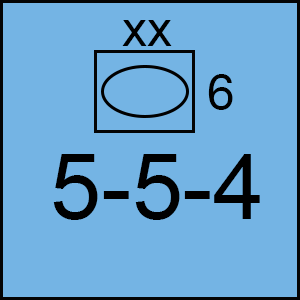
<style>
.page{position:relative;width:300px;height:300px;background:#74b4e4}
.page>*{position:absolute;margin:0}
.t1{font:50px "ArialMT";color:#000000}
.t2{font:91.7px "ArialMT";color:#000000}
</style>
<div class="page">
<p class="t1" style="left:122px;top:20px;width:50px;height:26px">xx</p>
<p class="t1" style="left:208px;top:74px;width:25px;height:36px">6</p>
<p class="t2" style="left:53px;top:154px;width:207px;height:66px">5-5-4</p>
</div>
